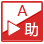
<style>
.page{position:relative;width:44px;height:44px;background:#ffffff}
.page>*{position:absolute;margin:0}
.t1{font:14.8px "ArialNarrow";color:#d62828;scale:1.19 1}
.t2{font:14.7px "KozGoPr6N-Regular";color:#ffffff}
</style>
<div class="page">
<p class="t1" style="left:17px;top:5px;width:11px;height:11px">А</p>
<p class="t2" style="left:24px;top:22px;width:14px;height:15px">助</p>
</div>
